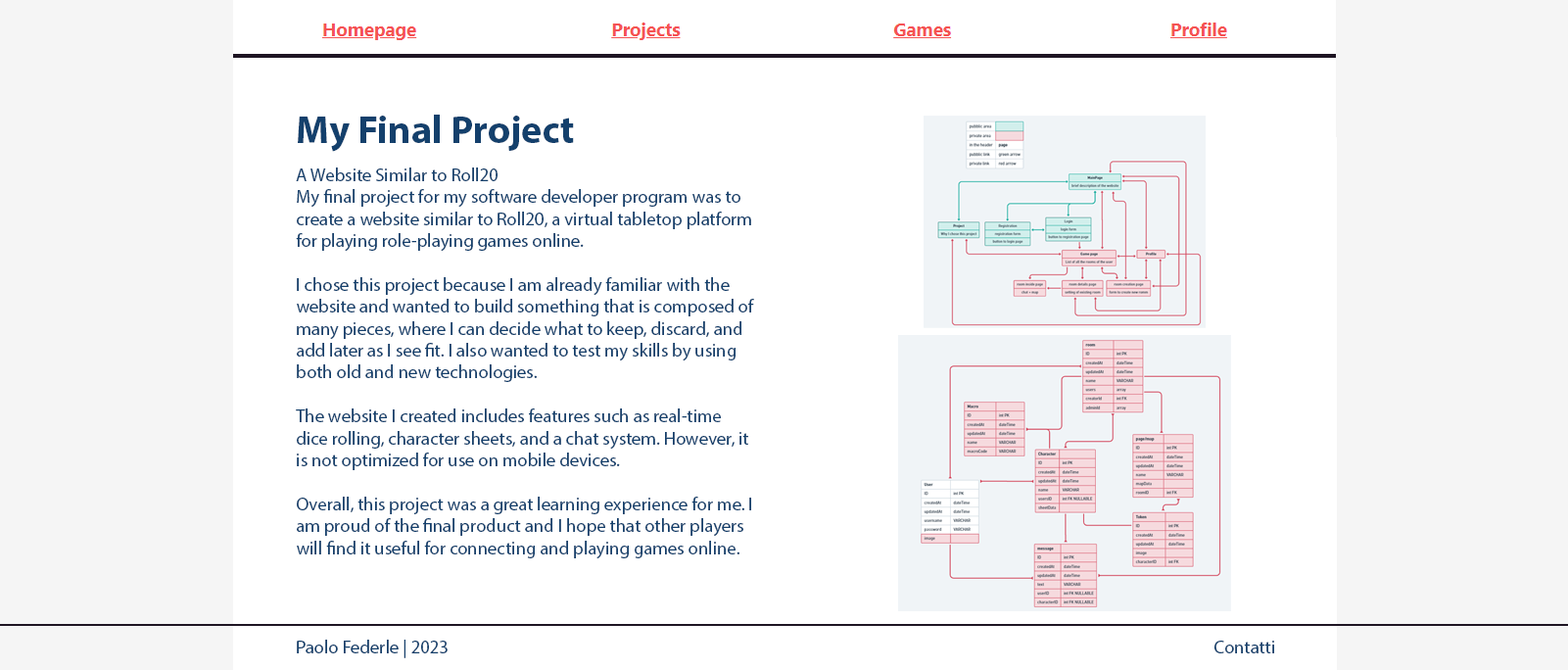
<style>
.page{position:relative;width:1568px;height:670px;background:#ffffff}
.page>*{position:absolute;margin:0}
.t1{font:39.2px "MyriadPro-Bold";color:#14406c}
.t2{font:18.3px "MyriadPro-Regular";color:#14406c}
</style>
<div class="page">
<p class="t1" style="left:298px;top:115px;width:276px;height:37px">My Final Project</p>
<p class="t2" style="left:296px;top:167px;width:458px;height:392px">A Website Similar to Roll20<br>My final project for my software developer program was to create a website similar to Roll20, a virtual tabletop platform for playing role-playing games online.<br><br>I chose this project because I am already familiar with the website and wanted to build something that is composed of many pieces, where I can decide what to keep, discard, and add later as I see fit. I also wanted to test my skills by using both old and new technologies.<br><br>The website I created includes features such as real-time dice rolling, character sheets, and a chat system. However, it is not optimized for use on mobile devices.<br><br>Overall, this project was a great learning experience for me. I am proud of the final product and I hope that other players will find it useful for connecting and playing games online.</p>
<p class="t2" style="left:297px;top:640px;width:151px;height:18px">Paolo Federle | 2023</p>
<p class="t2" style="left:1214px;top:641px;width:60px;height:12px">Contatti</p>
</div>
